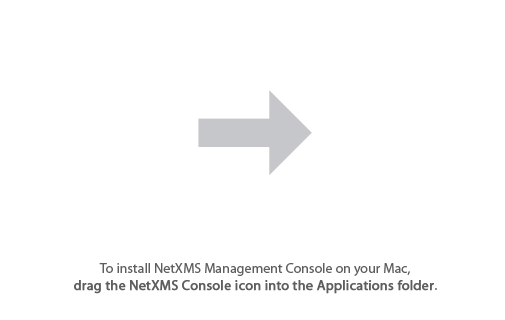
<style>
.page{position:relative;width:505px;height:320px;background:#ffffff}
.page>*{position:absolute;margin:0}
.t1{font:14px "MyriadPro-Regular";color:#5e5e5e;font-weight:bold}
.t2{font:14px "MyriadPro-Regular";color:#5e5e5e}
</style>
<div class="page">
<p class="t1" style="left:74px;top:263px;width:363px;height:31px;text-align:center"><span class="t2">To install NetXMS Management Console on your Mac,<br></span>drag the NetXMS Console icon into the Applications folder<span class="t2">.</span></p>
</div>
